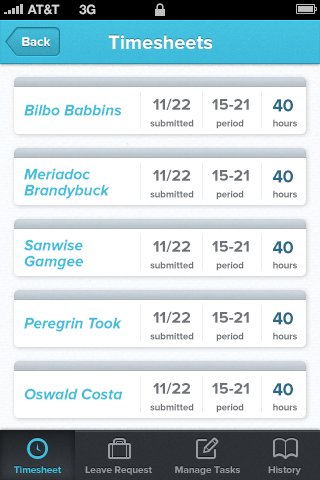
<style>
.page{position:relative;width:320px;height:480px;background:#ffffff}
.page>*{position:absolute;margin:0}
.t1{font:13px "HelveticaNeue-Bold";color:#d4d4d4;text-transform:uppercase}
.t2{font:13px "ProximaNova-Bold";color:#ffffff}
.t3{font:20px "ProximaNova-Bold";color:#ffffff}
.t4{font:16px "ProximaNova-Bold";color:#6f7276}
.t5{font:18px "ProximaNova-Bold";color:#2a6a88;scale:0.97 1}
.t6{font:16px "ProximaNova-BoldIt";color:#41bedd;scale:0.97 1}
.t7{font:10px "ProximaNova-Bold";color:#6f7276;scale:0.95 1}
.t8{font:16px/16px "ProximaNova-BoldIt";color:#41bedd;scale:0.97 1}
.t9{font:10px "ProximaNova-Bold";color:#41bedd}
.t10{font:10px "ProximaNova-Bold";color:#959ca3}
</style>
<div class="page">
<p class="t1" style="left:27px;top:4px;width:33px;height:11px">AT&amp;t</p>
<p class="t1" style="left:79px;top:4px;width:17px;height:11px">3G</p>
<p class="t2" style="left:22px;top:37px;width:29px;height:9px">Back</p>
<p class="t3" style="left:108px;top:35px;width:105px;height:14px">Timesheets</p>
<p class="t4" style="left:153px;top:98px;width:37px;height:12px">11/22</p>
<p class="t4" style="left:212px;top:99px;width:37px;height:11px">15-21</p>
<p class="t5" style="left:273px;top:99px;width:20px;height:13px">40</p>
<p class="t6" style="left:24px;top:104px;width:98px;height:12px">Bilbo Babbins</p>
<p class="t7" style="left:150px;top:119px;width:44px;height:8px">submitted</p>
<p class="t7" style="left:216px;top:119px;width:28px;height:10px">period</p>
<p class="t7" style="left:273px;top:119px;width:24px;height:8px">hours</p>
<p class="t8" style="left:24px;top:168px;width:86px;height:31px">Meriadoc<br>Brandybuck</p>
<p class="t4" style="left:153px;top:169px;width:37px;height:12px">11/22</p>
<p class="t4" style="left:212px;top:170px;width:37px;height:11px">15-21</p>
<p class="t5" style="left:273px;top:170px;width:20px;height:13px">40</p>
<p class="t7" style="left:150px;top:190px;width:44px;height:8px">submitted</p>
<p class="t7" style="left:216px;top:190px;width:28px;height:10px">period</p>
<p class="t7" style="left:273px;top:190px;width:24px;height:8px">hours</p>
<p class="t8" style="left:24px;top:239px;width:59px;height:31px">Sanwise<br>Gamgee</p>
<p class="t4" style="left:153px;top:240px;width:37px;height:12px">11/22</p>
<p class="t4" style="left:212px;top:241px;width:37px;height:11px">15-21</p>
<p class="t5" style="left:273px;top:241px;width:20px;height:13px">40</p>
<p class="t7" style="left:150px;top:261px;width:44px;height:8px">submitted</p>
<p class="t7" style="left:216px;top:261px;width:28px;height:10px">period</p>
<p class="t7" style="left:273px;top:261px;width:24px;height:8px">hours</p>
<p class="t6" style="left:24px;top:317px;width:98px;height:15px">Peregrin Took</p>
<p class="t4" style="left:153px;top:311px;width:37px;height:12px">11/22</p>
<p class="t4" style="left:212px;top:312px;width:37px;height:11px">15-21</p>
<p class="t5" style="left:273px;top:312px;width:20px;height:13px">40</p>
<p class="t7" style="left:150px;top:332px;width:44px;height:8px">submitted</p>
<p class="t7" style="left:216px;top:332px;width:28px;height:10px">period</p>
<p class="t7" style="left:273px;top:332px;width:24px;height:8px">hours</p>
<p class="t6" style="left:24px;top:388px;width:99px;height:12px">Oswald Costa</p>
<p class="t4" style="left:153px;top:382px;width:37px;height:12px">11/22</p>
<p class="t4" style="left:212px;top:383px;width:37px;height:11px">15-21</p>
<p class="t5" style="left:273px;top:383px;width:20px;height:13px">40</p>
<p class="t7" style="left:150px;top:403px;width:44px;height:8px">submitted</p>
<p class="t7" style="left:216px;top:403px;width:28px;height:10px">period</p>
<p class="t7" style="left:273px;top:403px;width:24px;height:8px">hours</p>
<p class="t9" style="left:14px;top:466px;width:48px;height:7px">Timesheet</p>
<p class="t9" style="left:14px;top:466px;width:48px;height:7px">Timesheet</p>
<p class="t10" style="left:85px;top:466px;width:67px;height:9px">Leave Request</p>
<p class="t10" style="left:175px;top:466px;width:65px;height:9px">Manage Tasks</p>
<p class="t10" style="left:268px;top:466px;width:33px;height:9px">History</p>
</div>
